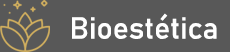
<style>
.page{position:relative;width:230px;height:52px;background:#585858}
.page>*{position:absolute;margin:0}
.t1{font:30px "Bahnschrift_438wght";color:#ffffff}
</style>
<div class="page">
<p class="t1" style="left:72px;top:13px;width:145px;height:26px">Bioestética</p>
</div>
